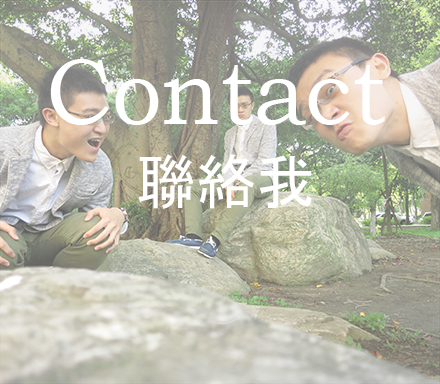
<style>
.page{position:relative;width:440px;height:384px}
.page>*{position:absolute;margin:0}
.t1{font:94px "BookmanOldStyle";color:#ffffff;scale:0.94 1}
.t2{font:60px "MS-Gothic";color:#ffffff}
</style>
<div class="page">
<p class="t1" style="left:50px;top:59px;width:335px;height:66px">Contact</p>
<p class="t2" style="left:138px;top:154px;width:174px;height:55px">聯絡我</p>
</div>
